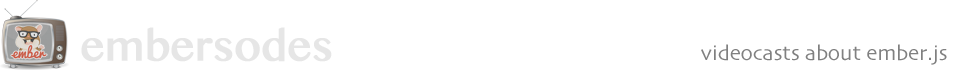
<style>
.page{position:relative;width:960px;height:70px;background:#ffffff}
.page>*{position:absolute;margin:0}
.t1{font:48.3px "KhmerMN";color:#e6e6e6;font-weight:bold}
.t2{font:21.5px "Skia-Regular";color:#808080}
</style>
<div class="page">
<p class="t1" style="left:81px;top:27px;width:251px;height:35px">embersodes</p>
<p class="t2" style="left:701px;top:44px;width:246px;height:21px">videocasts about ember.js</p>
</div>
